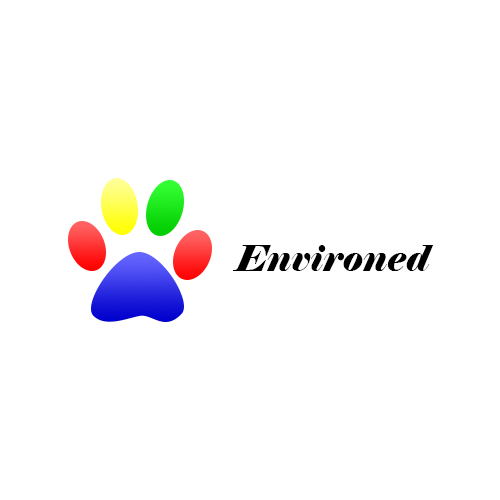
<style>
.page{position:relative;width:500px;height:500px;background:#ffffff}
.page>*{position:absolute;margin:0}
.t1{font:36px "Elephant-Italic";color:#000000}
</style>
<div class="page">
<p class="t1" style="left:233px;top:245px;width:201px;height:26px">Environed</p>
</div>
